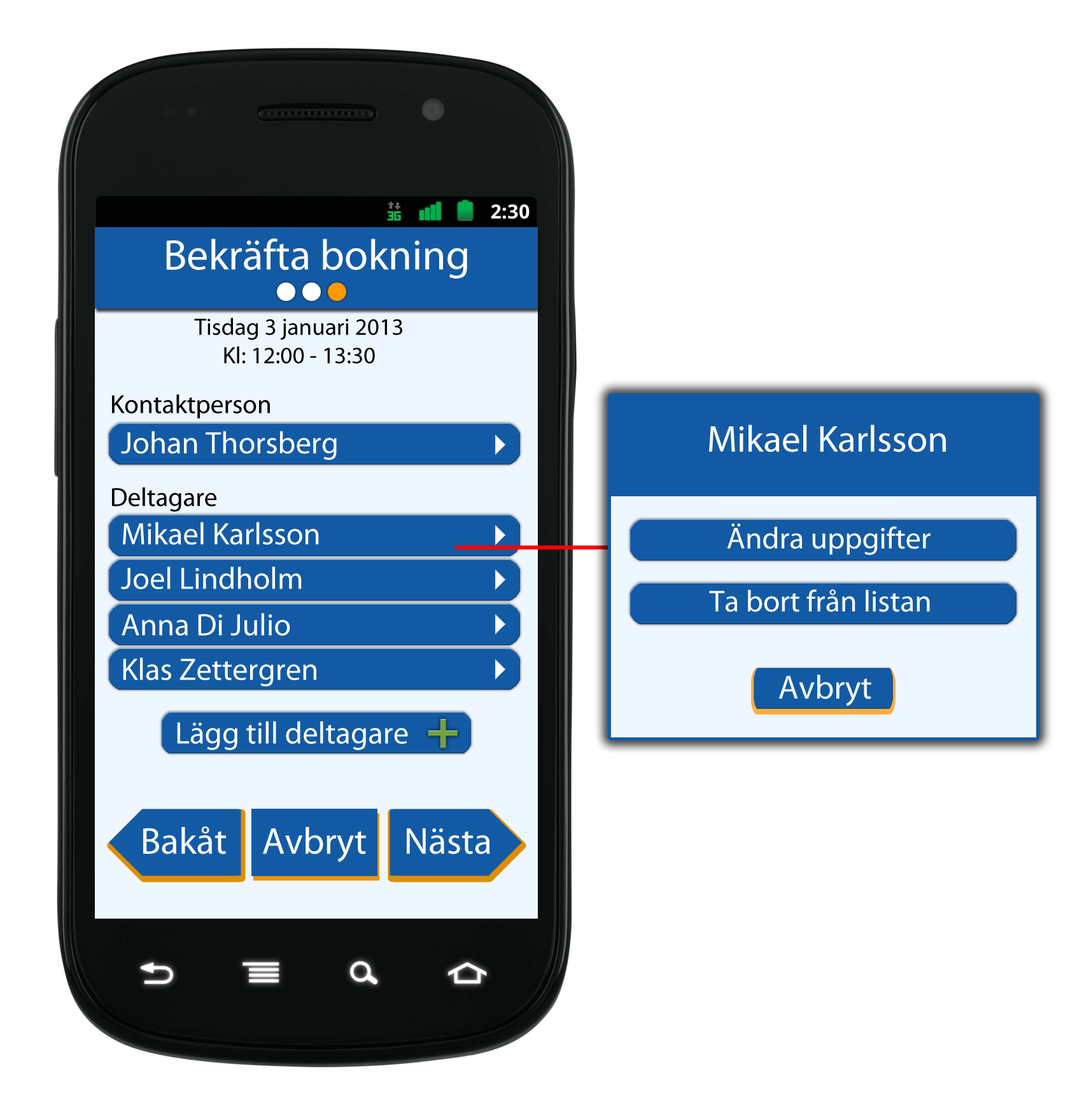
<style>
.page{position:relative;width:1082px;height:1102px;background:#ffffff}
.page>*{position:absolute;margin:0}
.t1{font:43px "MyriadPro-Regular";color:#ffffff}
.t2{font:23.8px "MyriadPro-Regular";color:#000000}
.t3{font:26.2px "MyriadPro-Regular";color:#000000}
.t4{font:37.6px "MyriadPro-Regular";color:#ffffff}
.t5{font:31.1px "MyriadPro-Regular";color:#ffffff}
.t6{font:30.5px "MyriadPro-Regular";color:#ffffff}
</style>
<div class="page">
<p class="t1" style="left:166px;top:238px;width:301px;height:41px">Bekräfta bokning</p>
<p class="t2" style="left:194px;top:318px;width:208px;height:46px;text-align:center">Tisdag 3 januari 2013<br>Kl: 12:00 - 13:30</p>
<p class="t3" style="left:112px;top:395px;width:158px;height:24px">Kontaktperson</p>
<p class="t4" style="left:709px;top:424px;width:237px;height:28px">Mikael Karlsson</p>
<p class="t5" style="left:121px;top:431px;width:216px;height:29px">Johan Thorsberg</p>
<p class="t3" style="left:112px;top:487px;width:104px;height:25px">Deltagare</p>
<p class="t5" style="left:123px;top:522px;width:196px;height:23px">Mikael Karlsson</p>
<p class="t6" style="left:727px;top:523px;width:203px;height:32px">Ändra uppgifter</p>
<p class="t5" style="left:121px;top:566px;width:181px;height:23px">Joel Lindholm</p>
<p class="t6" style="left:709px;top:589px;width:221px;height:23px">Ta bort från listan</p>
<p class="t5" style="left:122px;top:613px;width:168px;height:23px">Anna Di Julio</p>
<p class="t5" style="left:123px;top:657px;width:193px;height:30px">Klas Zettergren</p>
<p class="t5" style="left:177px;top:721px;width:231px;height:29px">Lägg till deltagare</p>
<p class="t4" style="left:143px;top:827px;width:83px;height:28px">Bakåt</p>
<p class="t4" style="left:263px;top:827px;width:103px;height:35px">Avbryt</p>
<p class="t4" style="left:407px;top:829px;width:83px;height:26px">Nästa</p>
</div>
